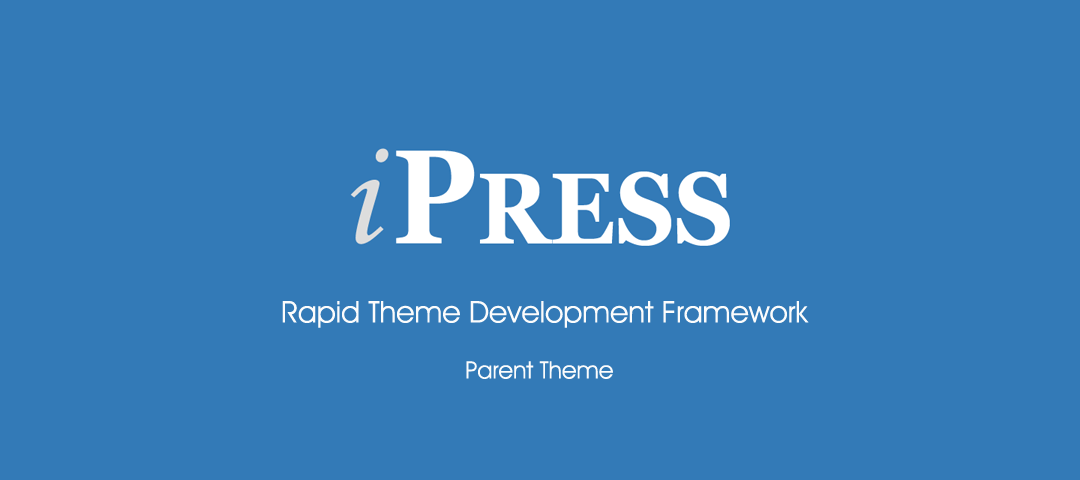
<style>
.page{position:relative;width:1080px;height:480px;background:#337ab7}
.page>*{position:absolute;margin:0}
.t1{font:30px "Decker-Regular";color:#fcfcfc}
.t2{font:24px "Decker-Regular";color:#fcfcfc}
</style>
<div class="page">
<p class="t1" style="left:282px;top:301px;width:527px;height:27px">Rapid Theme Development Framework</p>
<p class="t2" style="left:466px;top:361px;width:147px;height:18px">Parent Theme</p>
</div>
